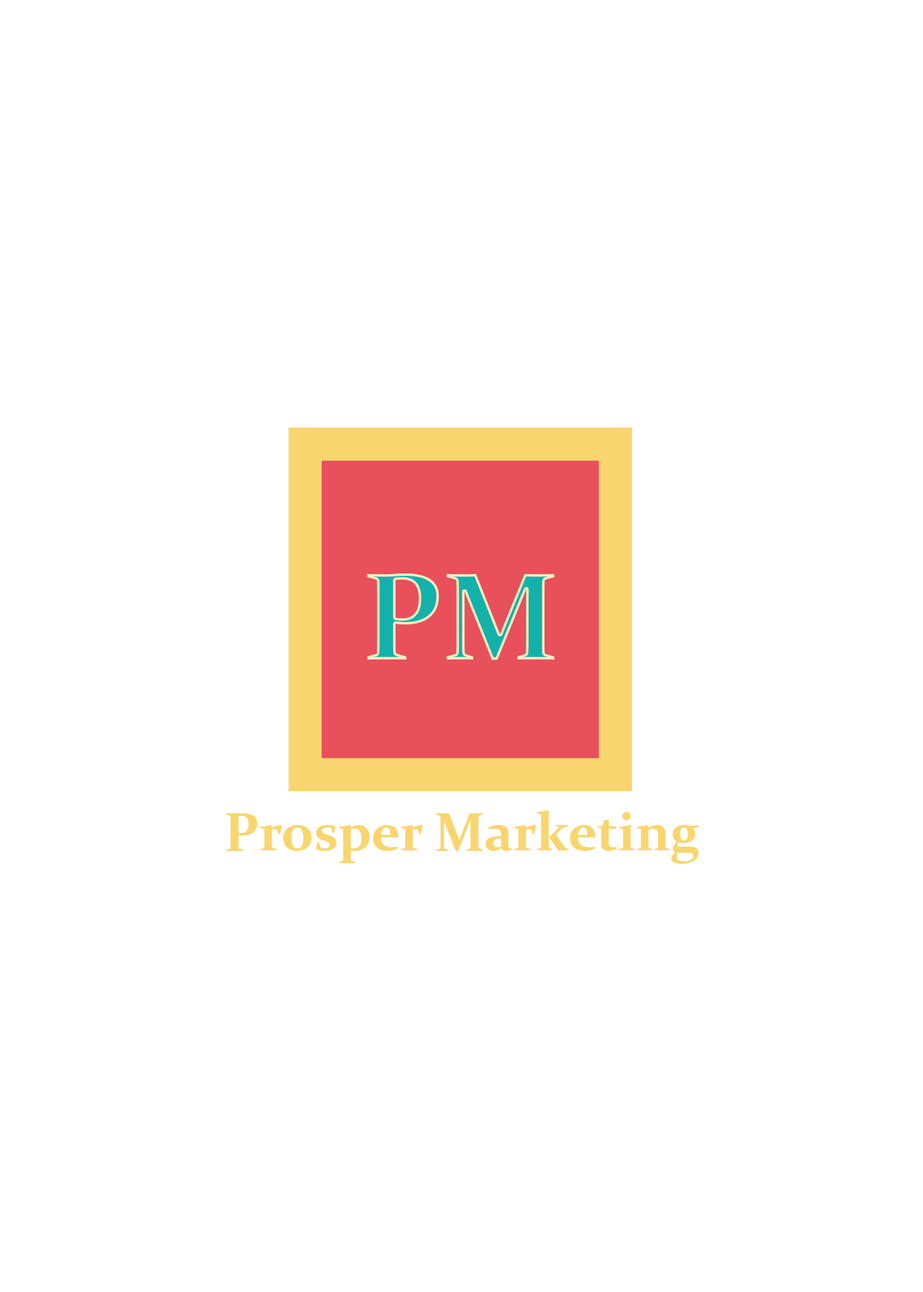
<style>
.page{position:relative;width:923px;height:1292px;background:#ffffff}
.page>*{position:absolute;margin:0}
.t1{font:125.6px "Constantia-Bold"}
.t2{font:53.8px "Constantia-Bold";color:#f9d56e}
</style>
<div class="page">
<p class="t1" style="left:367px;top:573px;width:188px;height:87px">PM</p>
<p class="t2" style="left:226px;top:810px;width:474px;height:54px">Prosper Marketing</p>
</div>
